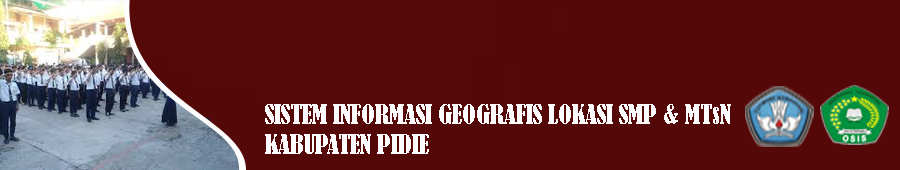
<style>
.page{position:relative;width:900px;height:170px;background:#540808}
.page>*{position:absolute;margin:0}
.t1{font:25px "BernardMT-Condensed";color:#fefcfc}
</style>
<div class="page">
<p class="t1" style="left:265px;top:104px;width:466px;height:20px">SISTEM INFORMASI GEOGRAFIS LOKASI SMP &amp; MTsN</p>
<p class="t1" style="left:265px;top:134px;width:164px;height:20px">KABUPATEN PIDIE</p>
</div>
